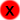
<style>
.page{position:relative;width:20px;height:20px;background:#ff0000}
.page>*{position:absolute;margin:0}
.t1{font:18.1px "UTM-Helve";color:#000000}
</style>
<div class="page">
<p class="t1" style="left:5px;top:6px;width:10px;height:10px">x</p>
</div>
